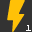
<style>
.page{position:relative;width:32px;height:32px;background:#333333}
.page>*{position:absolute;margin:0}
.t1{font:10px "CourierNewPSMT";color:#ffffff}
</style>
<div class="page">
<p class="t1" style="left:26px;top:25px;width:5px;height:6px">1</p>
</div>
